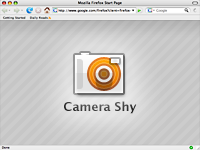
<style>
.page{position:relative;width:200px;height:150px}
.page>*{position:absolute;margin:0}
.t1{font:12px "LucidaGrande-Bold";color:#404040}
</style>
<div class="page">
<p class="t1" style="left:64px;top:101px;width:73px;height:13px">Camera Shy</p>
<p class="t1" style="left:64px;top:101px;width:73px;height:13px">Camera Shy</p>
</div>
